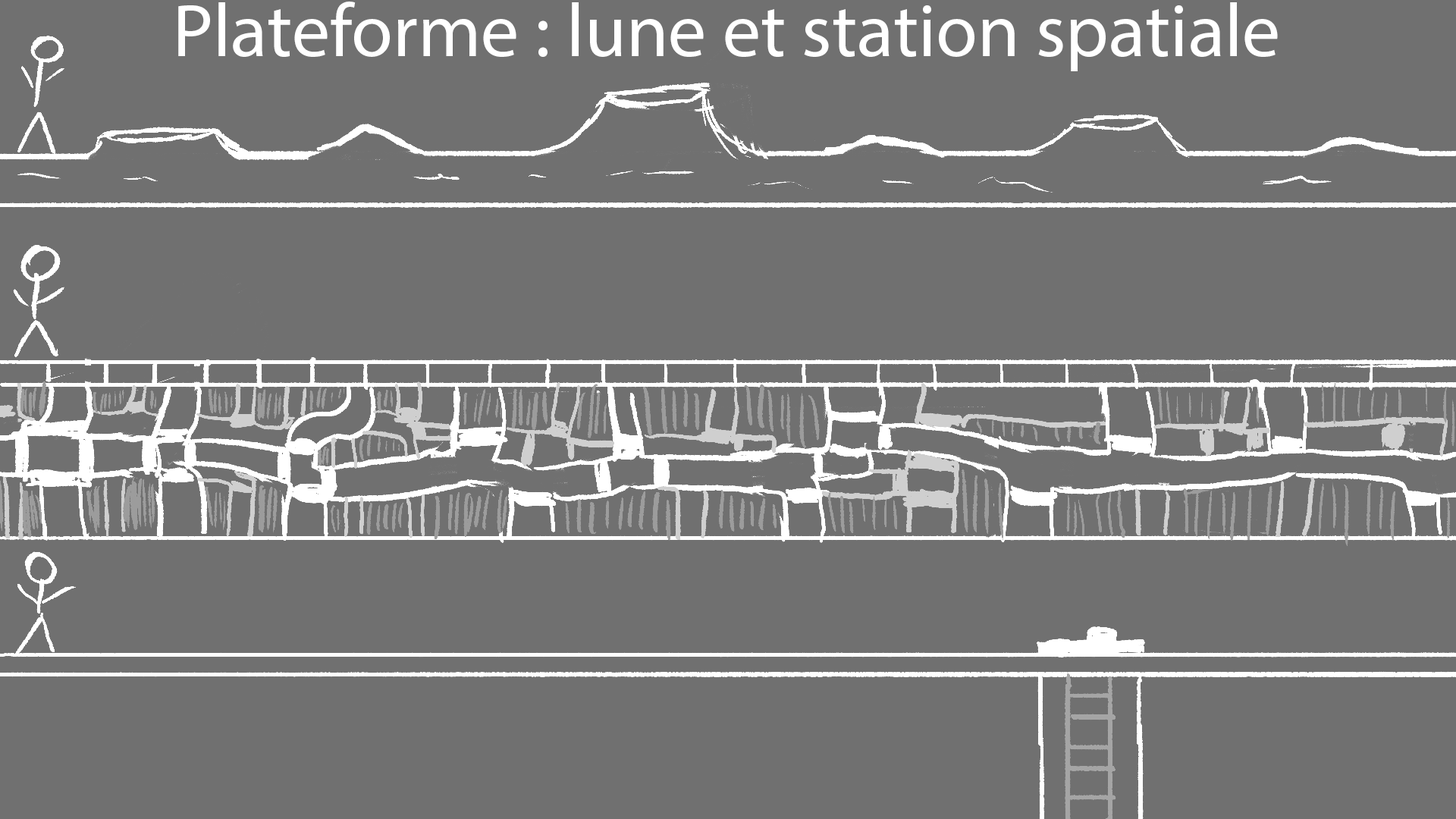
<style>
.page{position:relative;width:1456px;height:819px;background:#707070}
.page>*{position:absolute;margin:0}
.t1{font:75.8px "MyriadPro-Regular";color:#ffffff}
</style>
<div class="page">
<p class="t1" style="left:178px;top:2px;width:1100px;height:69px">Plateforme : lune et station spatiale</p>
</div>
